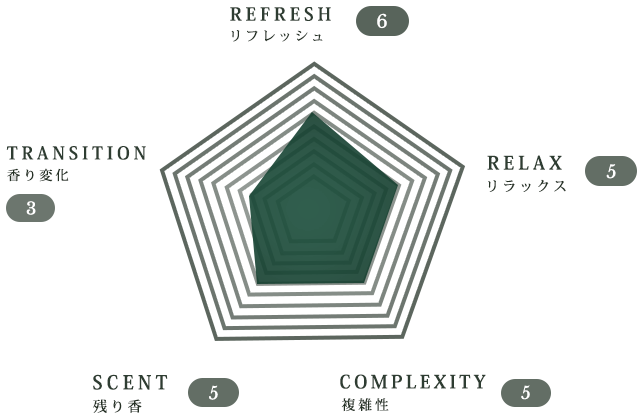
<style>
.page{position:relative;width:640px;height:420px;background:#ffffff}
.page>*{position:absolute;margin:0}
.t1{font:17.9px "KozMinPr6N-Bold";letter-spacing:0.22em;color:#27452e}
.t2{font:17.9px "LibreBaskerville-Regular";letter-spacing:0.06em;color:#ffffff}
.t3{font:13.4px "KozMinPr6N-Medium";letter-spacing:0.22em;color:#253125}
.t4{font:17.5px "KozMinPr6N-Bold";letter-spacing:0.22em;color:#27452e}
.t5{font:18.4px "KozMinPr6N-Bold";letter-spacing:0.22em;color:#27452e}
.t6{font:13.1px "KozMinPr6N-Medium";letter-spacing:0.22em;color:#20381f}
.t7{font:17.7px "LibreBaskerville-Regular";letter-spacing:0.06em;color:#ffffff}
.t8{font:13.8px "KozMinPr6N-Medium";letter-spacing:0.22em;color:#20381f}
.t9{font:16.8px "LibreBaskerville-Regular";letter-spacing:0.06em;color:#ffffff}
.t10{font:18.9px "KozMinPr6N-Bold";letter-spacing:0.22em;color:#27452e}
.t11{font:18.2px "KozMinPr6N-Bold";letter-spacing:0.18em;color:#27452e}
.t12{font:17.4px "LibreBaskerville-Regular";letter-spacing:0.06em;color:#ffffff}
.t13{font:17.1px "LibreBaskerville-Regular";letter-spacing:0.06em;color:#ffffff}
.t14{font:14.2px "KozMinPr6N-Medium";letter-spacing:0.22em;color:#20381f}
.t15{font:13.7px "KozMinPr6N-Medium";letter-spacing:0.22em;color:#253125}
</style>
<div class="page">
<p class="t1" style="left:230px;top:7px;width:101px;height:14px">REFRESH</p>
<p class="t2" style="left:377px;top:13px;width:10px;height:16px">6</p>
<p class="t3" style="left:231px;top:30px;width:92px;height:12px">リフレッシュ</p>
<p class="t4" style="left:6px;top:146px;width:140px;height:14px">TRANSITION</p>
<p class="t5" style="left:487px;top:155px;width:75px;height:15px">RELAX</p>
<p class="t6" style="left:7px;top:168px;width:62px;height:14px">香り変化</p>
<p class="t7" style="left:606px;top:164px;width:10px;height:15px">5</p>
<p class="t8" style="left:488px;top:179px;width:78px;height:13px">リラックス</p>
<p class="t9" style="left:26px;top:201px;width:10px;height:14px">3</p>
<p class="t10" style="left:93px;top:374px;width:75px;height:16px">SCENT</p>
<p class="t11" style="left:340px;top:374px;width:146px;height:15px">COMPLEXITY</p>
<p class="t12" style="left:209px;top:385px;width:9px;height:15px">5</p>
<p class="t13" style="left:521px;top:385px;width:9px;height:15px">5</p>
<p class="t14" style="left:93px;top:399px;width:49px;height:14px">残り香</p>
<p class="t15" style="left:341px;top:398px;width:48px;height:14px">複雑性</p>
</div>
